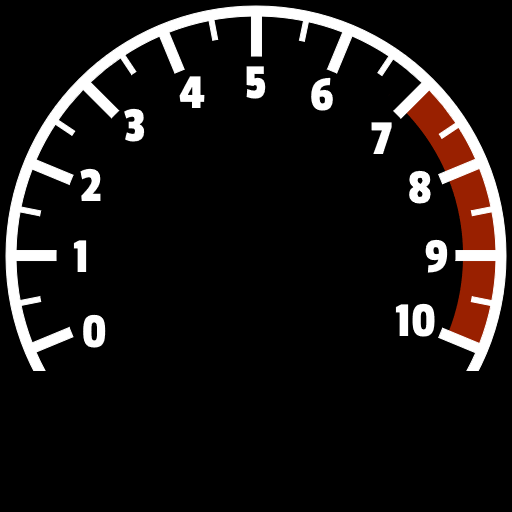
<style>
.page{position:relative;width:512px;height:512px;background:#000000}
.page>*{position:absolute;margin:0}
.t1{font:51px "PassionOne-Regular";color:#ffffff}
</style>
<div class="page">
<p class="t1" style="left:179px;top:76px;width:26px;height:32px">4</p>
<p class="t1" style="left:246px;top:66px;width:20px;height:33px">5</p>
<p class="t1" style="left:311px;top:77px;width:22px;height:34px">6</p>
<p class="t1" style="left:124px;top:108px;width:21px;height:34px">3</p>
<p class="t1" style="left:371px;top:122px;width:21px;height:32px">7</p>
<p class="t1" style="left:80px;top:168px;width:21px;height:33px">2</p>
<p class="t1" style="left:409px;top:170px;width:22px;height:34px">8</p>
<p class="t1" style="left:73px;top:240px;width:14px;height:32px">1</p>
<p class="t1" style="left:425px;top:239px;width:23px;height:34px">9</p>
<p class="t1" style="left:395px;top:303px;width:40px;height:34px">10</p>
<p class="t1" style="left:83px;top:314px;width:23px;height:34px">0</p>
</div>
